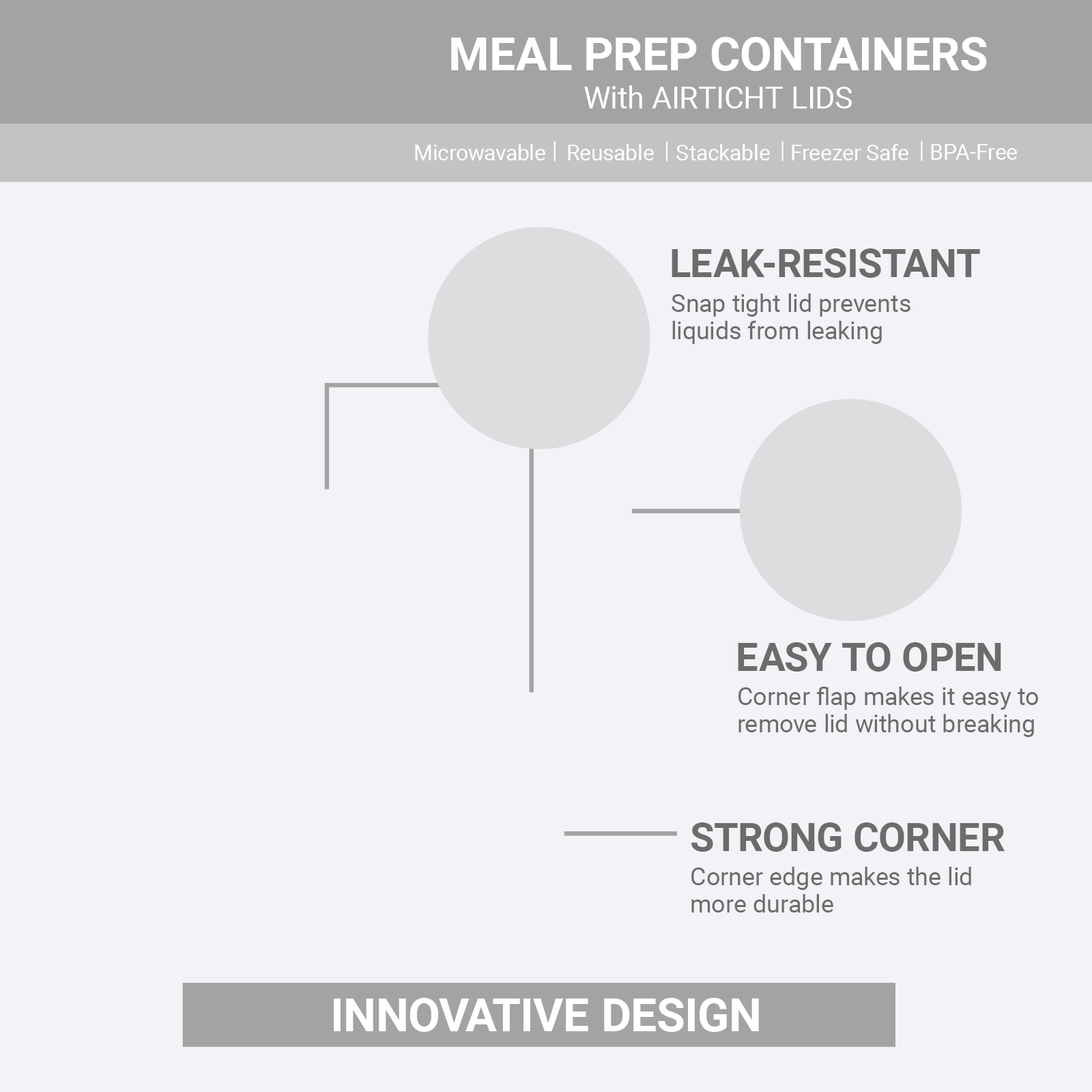
<style>
.page{position:relative;width:1092px;height:1092px;background:#f2f3f6}
.page>*{position:absolute;margin:0}
.t1{font:46.6px "Roboto-Bold";color:#ffffff}
.t2{font:30.6px "Roboto-Regular";color:#ffffff}
.t3{font:21.8px "Roboto-Regular";color:#ffffff}
.t4{font:39.3px "Roboto-Bold";color:#6c6c6c}
.t5{font:24.8px/27.7px "Roboto-Regular";color:#6c6c6c}
</style>
<div class="page">
<p class="t1" style="left:451px;top:37px;width:536px;height:34px">MEAL PREP CONTAINERS</p>
<p class="t2" style="left:584px;top:85px;width:268px;height:24px">With AIRTICHT LIDS</p>
<p class="t3" style="left:415px;top:144px;width:130px;height:16px">Microwavable</p>
<p class="t3" style="left:568px;top:144px;width:86px;height:16px">Reusable</p>
<p class="t3" style="left:676px;top:144px;width:94px;height:16px">Stackable</p>
<p class="t3" style="left:792px;top:144px;width:116px;height:16px">Freezer Safe</p>
<p class="t3" style="left:931px;top:144px;width:86px;height:16px">BPA-Free</p>
<p class="t4" style="left:672px;top:248px;width:308px;height:30px">LEAK-RESISTANT</p>
<p class="t5" style="left:672px;top:293px;width:238px;height:51px">Snap tight lid prevents<br>liquids from leaking</p>
<p class="t4" style="left:738px;top:642px;width:263px;height:30px">EASY TO OPEN</p>
<p class="t5" style="left:738px;top:687px;width:300px;height:50px">Corner flap makes it easy to<br>remove lid without breaking</p>
<p class="t4" style="left:691px;top:822px;width:314px;height:30px">STRONG CORNER</p>
<p class="t5" style="left:691px;top:867px;width:280px;height:45px">Corner edge makes the lid<br>more durable</p>
<p class="t1" style="left:334px;top:998px;width:425px;height:34px">INNOVATIVE DESIGN</p>
</div>
